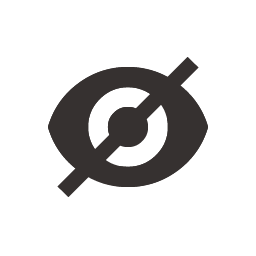
<style>
.page{position:relative;width:256px;height:256px;background:#ffffff}
.page>*{position:absolute;margin:0}
.t1{font:200px "Wundercon-Light";letter-spacing:-0.05em;color:#363130}
</style>
<div class="page">
<p class="t1" style="left:48px;top:57px;width:160px;height:140px">V</p>
<p class="t1" style="left:48px;top:67px;width:160px;height:120px">U</p>
</div>
